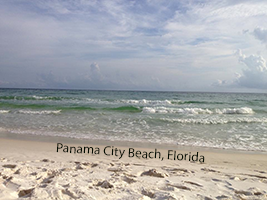
<style>
.page{position:relative;width:267px;height:200px}
.page>*{position:absolute;margin:0}
.t1{font:13.3px "MyriadPro-Regular";color:#040c01}
</style>
<div class="page">
<p class="t1" style="left:56px;top:143px;width:149px;height:20px;rotate:4deg">Panama City Beach, Florida</p>
</div>
